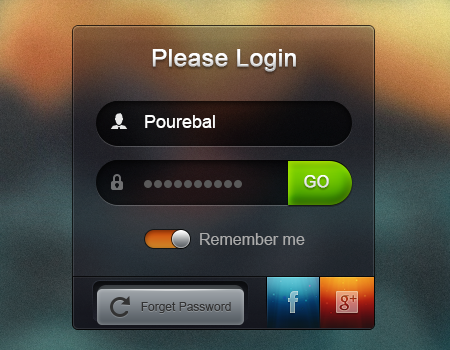
<style>
.page{position:relative;width:450px;height:350px}
.page>*{position:absolute;margin:0}
.t1{font:24px "ArialMT";color:#ffffff;font-weight:bold}
.t2{font:18px "ArialMT";color:#ffffff}
.t3{font:16px "ArialMT";color:#ebebeb;font-weight:bold}
.t4{font:16px "ArialMT";color:#ababab}
.t5{font:12px "ArialMT";color:#333333}
</style>
<div class="page">
<p class="t1" style="left:152px;top:49px;width:144px;height:23px">Please Login</p>
<p class="t2" style="left:145px;top:115px;width:70px;height:13px">Pourebal</p>
<p class="t3" style="left:304px;top:175px;width:25px;height:13px">GO</p>
<p class="t4" style="left:200px;top:233px;width:105px;height:12px">Remember me</p>
<p class="t5" style="left:141px;top:302px;width:90px;height:11px">Forget Password</p>
</div>
